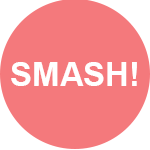
<style>
.page{position:relative;width:150px;height:150px;background:#f4797c}
.page>*{position:absolute;margin:0}
.t1{font:33px "Arial-BoldMT";color:#ffffff}
</style>
<div class="page">
<p class="t1" style="left:11px;top:62px;width:126px;height:24px">SMASH!</p>
</div>
